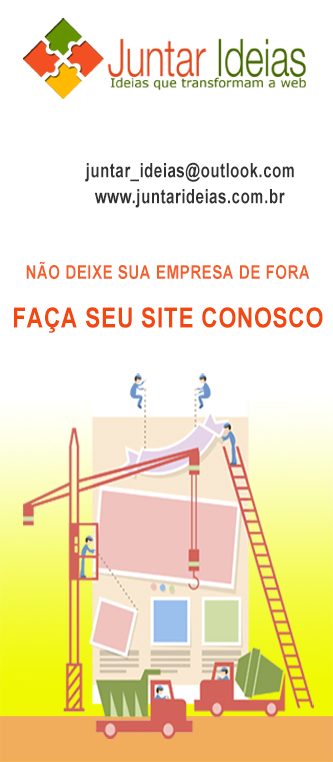
<style>
.page{position:relative;width:333px;height:762px;background:#ffffff}
.page>*{position:absolute;margin:0}
.t1{font:19.7px "Arial-BoldMT";letter-spacing:0.025em;color:#313131;scale:0.78 1}
.t2{font:18.7px "Arial-BoldMT";letter-spacing:0.025em;color:#f45e29;scale:0.82 1}
.t3{font:28.1px "Arial-BoldMT";letter-spacing:0.025em;color:#f2480d;scale:0.82 1}
</style>
<div class="page">
<p class="t1" style="left:85px;top:162px;width:209px;height:20px">juntar_ideias@outlook.com</p>
<p class="t1" style="left:94px;top:189px;width:191px;height:19px">www.juntarideias.com.br</p>
<p class="t2" style="left:26px;top:261px;width:284px;height:18px">NÃO DEIXE SUA EMPRESA DE FORA</p>
<p class="t3" style="left:14px;top:307px;width:309px;height:26px">FAÇA SEU SITE CONOSCO</p>
</div>
